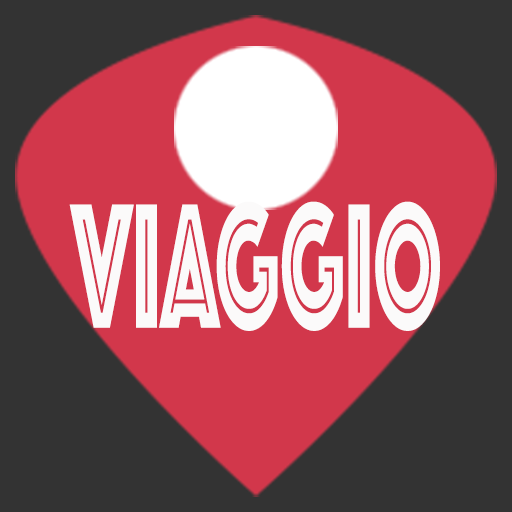
<style>
.page{position:relative;width:512px;height:512px;background:#333333}
.page>*{position:absolute;margin:0}
.t1{font:184.3px "Phosphate-Inline";letter-spacing:0.01em;color:#fbfafa;scale:0.5 1}
</style>
<div class="page">
<p class="t1" style="left:69px;top:201px;width:371px;height:130px">VIAGGIO</p>
</div>
